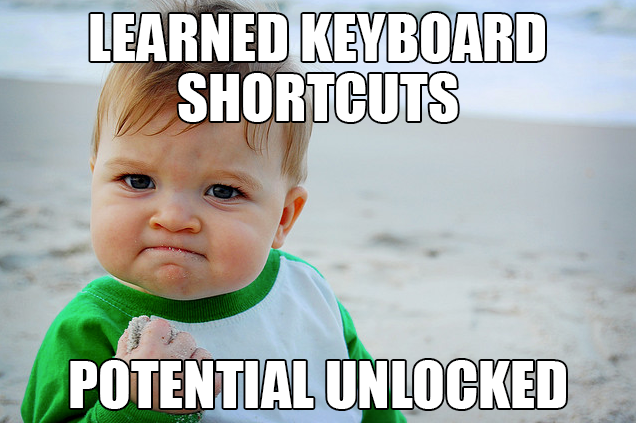
<style>
.page{position:relative;width:636px;height:423px}
.page>*{position:absolute;margin:0}
.t1{font:60px/60px "Impact";color:#ffffff}
.t2{font:60px "Impact";color:#ffffff}
</style>
<div class="page">
<p class="t1" style="left:90px;top:13px;width:455px;height:109px;text-align:center">LEARNED KEYBOARD<br>SHORTCUTS</p>
<p class="t2" style="left:70px;top:360px;width:496px;height:49px">POTENTIAL UNLOCKED</p>
</div>
